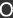
<style>
.page{position:relative;width:13px;height:18px;background:#333333}
.page>*{position:absolute;margin:0}
.t1{font:19.5px "MicrosoftNewTaiLue";color:#ffffff}
</style>
<div class="page">
<p class="t1" style="left:0px;top:2px;width:13px;height:15px">O</p>
</div>
